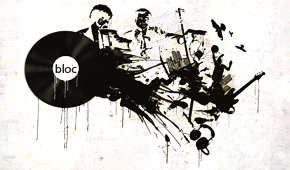
<style>
.page{position:relative;width:290px;height:170px}
.page>*{position:absolute;margin:0}
.t1{font:12px "MyriadPro-Regular";color:#2a1b17}
</style>
<div class="page">
<p class="t1" style="left:55px;top:64px;width:22px;height:9px">bloc</p>
</div>
